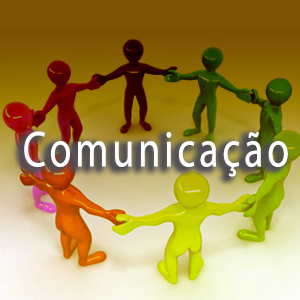
<style>
.page{position:relative;width:300px;height:300px}
.page>*{position:absolute;margin:0}
.t1{font:50.7px "MyriadPro-Regular";letter-spacing:0.1em;color:#ffffff;scale:0.78 1}
</style>
<div class="page">
<p class="t1" style="left:24px;top:131px;width:264px;height:46px">Comunicação</p>
</div>
